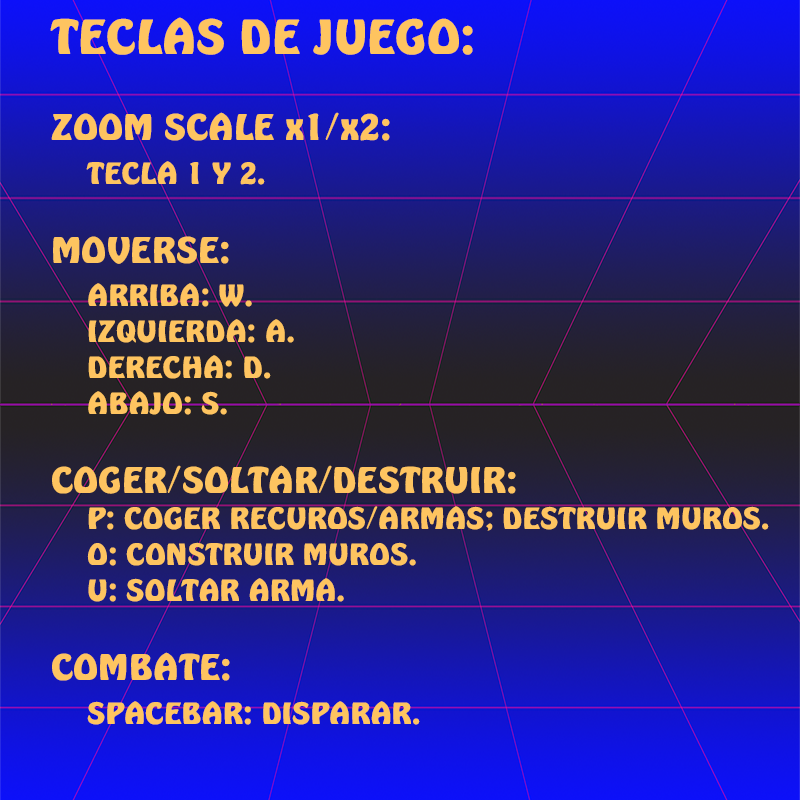
<style>
.page{position:relative;width:800px;height:800px}
.page>*{position:absolute;margin:0}
.t1{font:30px "Emmett";color:#fec460}
.t2{font:48px "Emmett";color:#fec460}
.t3{font:36px "Emmett";color:#fec460}
</style>
<div class="page">
<p class="t1" style="left:50px;top:17px;width:719px;height:708px"><span class="t2">TECLAS DE JUEGO:<br></span><span class="t3"><br>ZOOM SCALE x1/x2: <br> </span>TECLA 1 Y 2.<br><br><span class="t3">MOVERSE:<br> </span>ARRIBA: W.<br> IZQUIERDA: A.<br> DERECHA: D.<br> ABAJO: S.<br><br><span class="t3">COGER/SOLTAR/DESTRUIR:<br></span> P: COGER RECUROS/ARMAS; DESTRUIR MUROS.<br> O: CONSTRUIR MUROS.<br> U: SOLTAR ARMA.<br><br><span class="t3">COMBATE:<br> </span>SPACEBAR: DISPARAR.</p>
</div>
